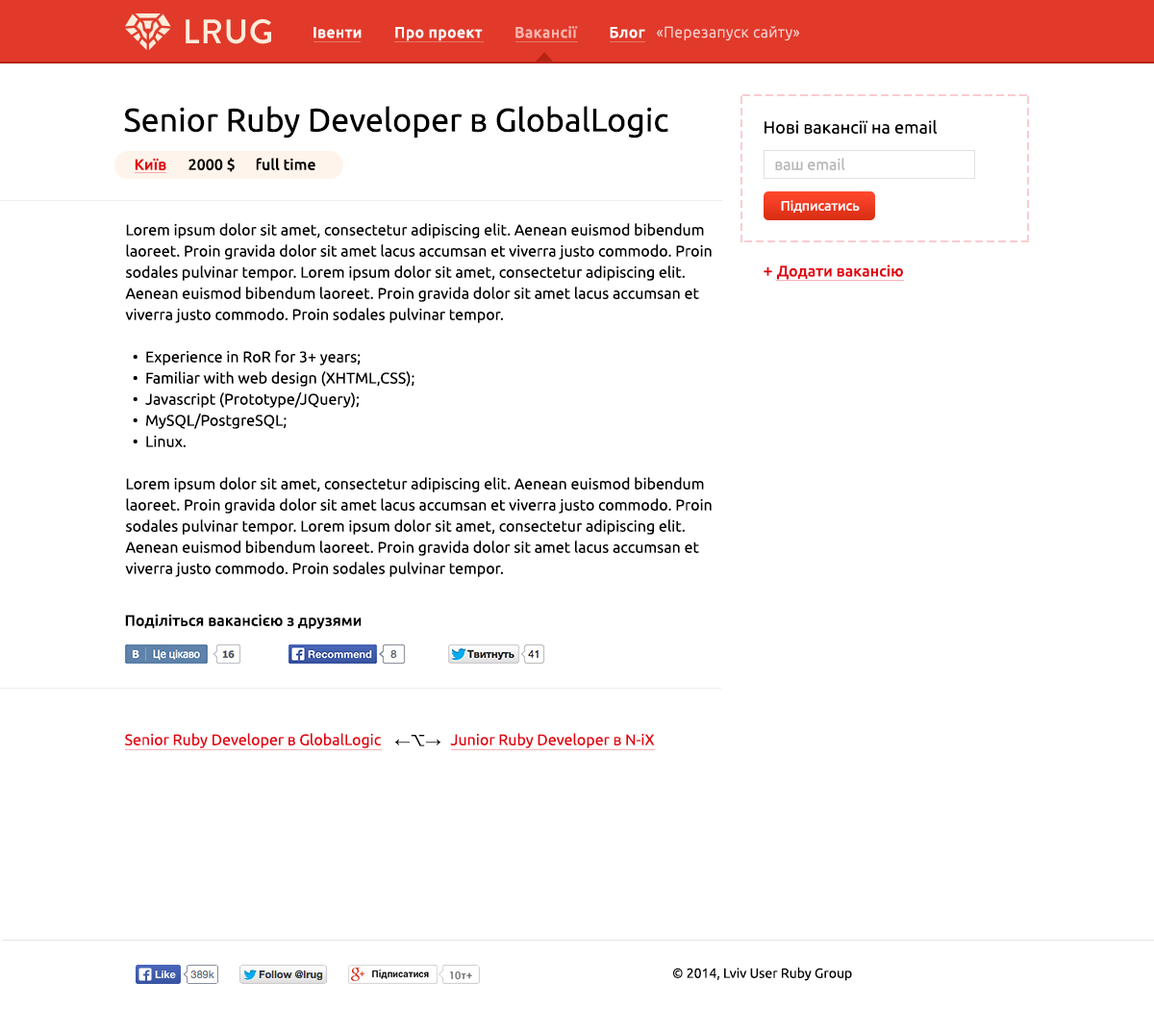
<style>
.page{position:relative;width:1154px;height:1033px;background:#ffffff}
.page>*{position:absolute;margin:0}
.t1{font:15.4px "Ubuntu-Medium";letter-spacing:0.034em;color:#ffffff}
.t2{font:15.4px "Ubuntu-Medium";letter-spacing:0.034em;color:#ffb4ad}
.t3{font:15.4px "Ubuntu-Light";letter-spacing:0.034em;color:#f6d1cf}
.t4{font:32.7px "Ubuntu";color:#000000}
.t5{font:17.3px "Ubuntu";color:#000000}
.t6{font:15.4px "Ubuntu-Medium";color:#e3000e}
.t7{font:15.4px "Ubuntu-Medium";color:#000000}
.t8{font:15.4px "Ubuntu";color:#b8b8b8}
.t9{font:13.5px "Ubuntu";color:#ffffff}
.t10{font:15.4px/21.2px "Ubuntu";color:#000000}
.t11{font:17.3px "Ubuntu-Medium";color:#e3000e}
.t12{font:15.4px "Ubuntu";color:#e3000e}
.t13{font:15.4px "ArialMT";color:#000000}
.t14{font:15.4px "LucidaGrande";color:#000000}
.t15{font:13.5px "Ubuntu";color:#000000}
</style>
<div class="page">
<p class="t1" style="left:314px;top:26px;width:331px;height:15px">Івенти        Про проект        <span class="t2">Вакансії        </span>Блог</p>
<p class="t3" style="left:657px;top:26px;width:143px;height:15px">«Перезапуск сайту»</p>
<p class="t4" style="left:124px;top:106px;width:545px;height:33px">Senior Ruby Developer в GlobalLogic</p>
<p class="t5" style="left:765px;top:119px;width:172px;height:15px">Нові вакансії на email</p>
<p class="t6" style="left:135px;top:158px;width:31px;height:12px">Київ</p>
<p class="t7" style="left:189px;top:158px;width:46px;height:14px">2000 $</p>
<p class="t7" style="left:256px;top:158px;width:59px;height:12px">full time</p>
<p class="t8" style="left:775px;top:158px;width:70px;height:12px">ваш email</p>
<p class="t9" style="left:781px;top:200px;width:79px;height:13px">Підписатись</p>
<p class="t10" style="left:125px;top:223px;width:587px;height:354px">Lorem ipsum dolor sit amet, consectetur adipiscing elit. Aenean euismod bibendum laoreet. Proin gravida dolor sit amet lacus accumsan et viverra justo commodo. Proin sodales pulvinar tempor. Lorem ipsum dolor sit amet, consectetur adipiscing elit. Aenean euismod bibendum laoreet. Proin gravida dolor sit amet lacus accumsan et viverra justo commodo. Proin sodales pulvinar tempor.<br><br>  •  Experience in RoR for 3+ years;<br>  •  Familiar with web design (XHTML,CSS);<br>  •  Javascript (Prototype/JQuery);<br>  •  MySQL/PostgreSQL;<br>  •  Linux.<br><br>Lorem ipsum dolor sit amet, consectetur adipiscing elit. Aenean euismod bibendum laoreet. Proin gravida dolor sit amet lacus accumsan et viverra justo commodo. Proin sodales pulvinar tempor. Lorem ipsum dolor sit amet, consectetur adipiscing elit. Aenean euismod bibendum laoreet. Proin gravida dolor sit amet lacus accumsan et viverra justo commodo. Proin sodales pulvinar tempor.</p>
<p class="t6" style="left:764px;top:265px;width:139px;height:15px"><span class="t11">+ </span>Додати вакансію</p>
<p class="t7" style="left:125px;top:614px;width:237px;height:15px">Поділіться вакансією з друзями</p>
<p class="t12" style="left:125px;top:733px;width:256px;height:15px">Senior Ruby Developer в GlobalLogic</p>
<p class="t13" style="left:395px;top:735px;width:46px;height:11px">←<span class="t14">⌥</span>→</p>
<p class="t12" style="left:450px;top:733px;width:205px;height:15px">Junior Ruby Developer в N-iX</p>
<p class="t15" style="left:672px;top:967px;width:180px;height:14px">© 2014, Lviv User Ruby Group</p>
</div>
